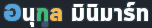
<style>
.page{position:relative;width:152px;height:28px;background:#1f262d}
.page>*{position:absolute;margin:0}
.t1{font:26px "Cloud-Bold";color:#ffffff}
.t2{font:34px "Cloud-Bold";color:#54a4e0}
.t3{font:26px "Cloud-Bold";color:#42b979}
.t4{font:26px "Cloud-Bold";color:#3c5075}
.t5{font:26px "Cloud-Bold";color:#f5b952}
</style>
<div class="page">
<p class="t1" style="left:4px;top:2px;width:144px;height:25px"><span class="t2">อ</span>นุ<span class="t3">ก</span><span class="t4">ู</span><span class="t5">ล </span>มินิมาร์ท</p>
</div>
